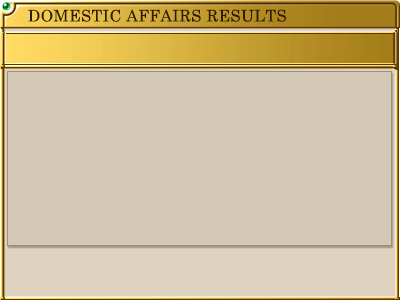
<style>
.page{position:relative;width:400px;height:300px;background:#d4c9b7}
.page>*{position:absolute;margin:0}
.t1{font:16px "CenturySchoolbook";letter-spacing:0.025em;color:#321a02}
</style>
<div class="page">
<p class="t1" style="left:28px;top:9px;width:258px;height:13px">DOMESTIC AFFAIRS RESULTS</p>
</div>
